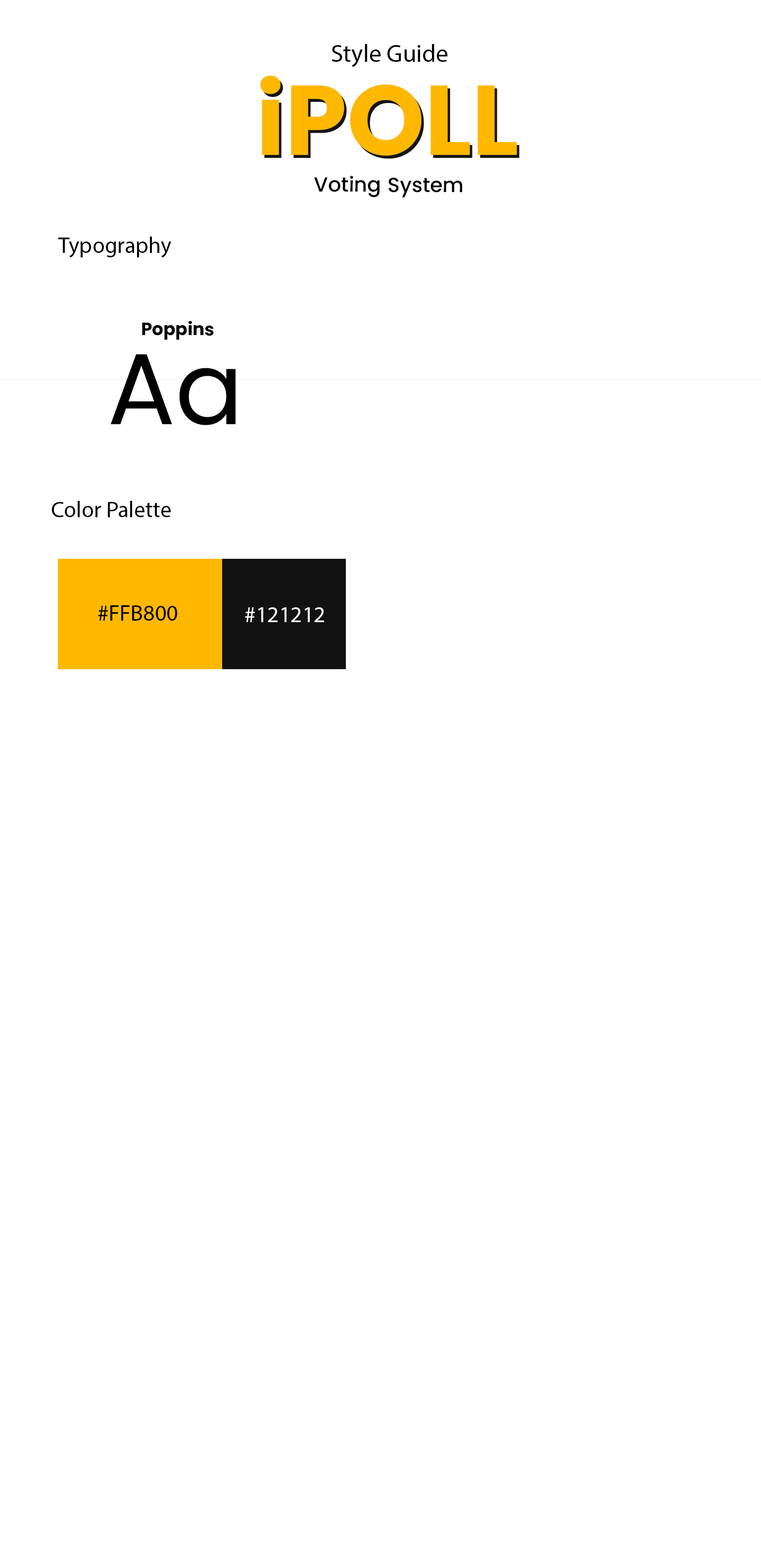
<style>
.page{position:relative;width:761px;height:1567px;background:#ffffff}
.page>*{position:absolute;margin:0}
.t1{font:24.7px "MyriadPro-Regular";color:#000000}
.t2{font:99px "Poppins-Bold";color:#ffb800}
.t3{font:20.4px "Poppins-Medium";color:#000000}
.t4{font:22.7px "MyriadPro-Regular";color:#000000}
.t5{font:17.7px "Poppins-Bold";color:#010101}
.t6{font:100.8px "Poppins-Regular";color:#000000}
.t7{font:22.7px "MyriadPro-Regular";color:#ffffff}
</style>
<div class="page">
<p class="t1" style="left:332px;top:44px;width:116px;height:23px">Style Guide</p>
<p class="t2" style="left:260px;top:75px;width:257px;height:81px">iPOLL</p>
<p class="t3" style="left:314px;top:176px;width:148px;height:21px">Voting System</p>
<p class="t4" style="left:58px;top:237px;width:113px;height:21px">Typography</p>
<p class="t5" style="left:142px;top:321px;width:72px;height:19px">Poppins</p>
<p class="t6" style="left:110px;top:354px;width:126px;height:71px">Aa</p>
<p class="t4" style="left:51px;top:501px;width:120px;height:16px">Color Palette</p>
<p class="t4" style="left:98px;top:605px;width:79px;height:16px">#FFB800</p>
<p class="t7" style="left:245px;top:607px;width:79px;height:15px">#121212</p>
</div>
